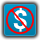
<style>
.page{position:relative;width:40px;height:40px}
.page>*{position:absolute;margin:0}
.t1{font:26px "Roboto-Bold";color:#ffffff}
</style>
<div class="page">
<p class="t1" style="left:13px;top:7px;width:14px;height:25px">$</p>
</div>
